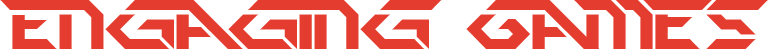
<style>
.page{position:relative;width:768px;height:49px;background:#ffffff}
.page>*{position:absolute;margin:0}
.t1{font:70px "PerfectDark(BRK)";color:#e43d30}
</style>
<div class="page">
<p class="t1" style="left:0px;top:0px;width:768px;height:49px">Engaging Games</p>
</div>
